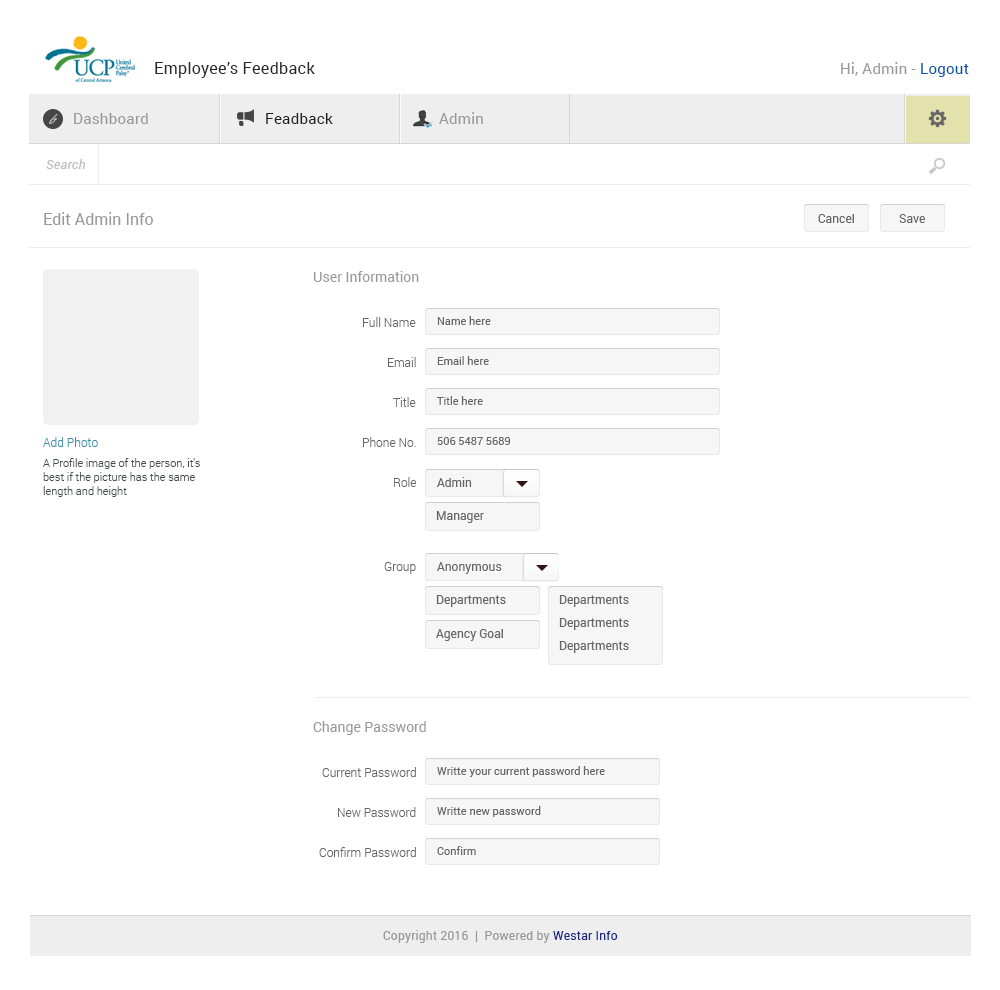
<style>
.page{position:relative;width:1000px;height:990px;background:#ffffff}
.page>*{position:absolute;margin:0}
.t1{font:16px "Roboto-Regular";letter-spacing:0.02em;color:#282828}
.t2{font:15px "Roboto-Regular";letter-spacing:0.02em;color:#989898}
.t3{font:15px "Roboto-Regular";letter-spacing:0.02em;color:#0053a8}
.t4{font:15px "Roboto-Regular";letter-spacing:0.02em;color:#212121}
.t5{font:10px "BickhamScriptPro-Regular";letter-spacing:0.02em;color:#bababa}
.t6{font:13px "Roboto-Italic";letter-spacing:0.02em;color:#bebebe}
.t7{font:16px "Roboto-Regular";color:#989898}
.t8{font:12px "Roboto-Regular";color:#666666}
.t9{font:14px "Roboto-Regular";color:#989898}
.t10{font:12px "Roboto-Light";color:#666666}
.t11{font:11px "Roboto-Regular";color:#666666}
.t12{font:12px "Roboto-Light";color:#368fa7}
.t13{font:11px/14px "Roboto-Light";color:#474a4b}
.t14{font:12px "Roboto-Regular";letter-spacing:0.02em;color:#989898}
.t15{font:12px "Roboto-Regular";letter-spacing:0.02em;color:#172788}
</style>
<div class="page">
<p class="t1" style="left:155px;top:62px;width:160px;height:16px">Employee’s Feedback</p>
<p class="t2" style="left:841px;top:62px;width:128px;height:15px">Hi, Admin - <span class="t3">Logout</span></p>
<p class="t2" style="left:74px;top:113px;width:74px;height:11px">Dashboard</p>
<p class="t4" style="left:266px;top:113px;width:67px;height:11px">Feadback</p>
<p class="t2" style="left:439px;top:112px;width:44px;height:12px">Admin</p>
<p class="t5" style="left:48px;top:114px;width:10px;height:10px">fg</p>
<p class="t6" style="left:46px;top:159px;width:40px;height:10px">Search</p>
<p class="t7" style="left:44px;top:212px;width:109px;height:13px">Edit Admin Info</p>
<p class="t8" style="left:818px;top:214px;width:36px;height:9px">Cancel</p>
<p class="t8" style="left:899px;top:214px;width:26px;height:9px">Save</p>
<p class="t9" style="left:313px;top:271px;width:106px;height:11px">User Information</p>
<p class="t10" style="left:363px;top:317px;width:53px;height:10px">Full Name</p>
<p class="t11" style="left:437px;top:316px;width:54px;height:9px">Name here</p>
<p class="t10" style="left:388px;top:357px;width:28px;height:10px">Email</p>
<p class="t11" style="left:437px;top:356px;width:52px;height:9px">Email here</p>
<p class="t10" style="left:393px;top:397px;width:23px;height:10px">Title</p>
<p class="t11" style="left:437px;top:396px;width:46px;height:9px">Title here</p>
<p class="t12" style="left:43px;top:437px;width:55px;height:10px">Add Photo</p>
<p class="t10" style="left:363px;top:437px;width:53px;height:10px">Phone No.</p>
<p class="t11" style="left:437px;top:437px;width:74px;height:8px">506 5487 5689</p>
<p class="t13" style="left:43px;top:458px;width:157px;height:39px">A Profile image of the person, it's<br>best if the picture has the same<br>length and height</p>
<p class="t10" style="left:394px;top:477px;width:23px;height:10px">Role</p>
<p class="t8" style="left:437px;top:477px;width:35px;height:10px">Admin</p>
<p class="t8" style="left:436px;top:511px;width:48px;height:12px">Manager</p>
<p class="t10" style="left:384px;top:562px;width:32px;height:12px">Group</p>
<p class="t8" style="left:437px;top:562px;width:65px;height:12px">Anonymous</p>
<p class="t8" style="left:436px;top:595px;width:70px;height:12px">Departments</p>
<p class="t8" style="left:559px;top:595px;width:70px;height:12px">Departments</p>
<p class="t8" style="left:436px;top:629px;width:67px;height:12px">Agency Goal</p>
<p class="t8" style="left:559px;top:618px;width:70px;height:12px">Departments</p>
<p class="t8" style="left:559px;top:641px;width:70px;height:12px">Departments</p>
<p class="t9" style="left:313px;top:721px;width:113px;height:14px">Change Password</p>
<p class="t10" style="left:322px;top:767px;width:94px;height:10px">Current Password</p>
<p class="t11" style="left:437px;top:766px;width:168px;height:11px">Writte your current password here</p>
<p class="t10" style="left:338px;top:807px;width:78px;height:10px">New Password</p>
<p class="t11" style="left:437px;top:806px;width:104px;height:11px">Writte new password</p>
<p class="t11" style="left:437px;top:846px;width:39px;height:9px">Confirm</p>
<p class="t10" style="left:319px;top:847px;width:97px;height:10px">Confirm Password</p>
<p class="t14" style="left:383px;top:930px;width:235px;height:13px">Copyright 2016  |  Powered by <span class="t15">Westar Info</span></p>
</div>
